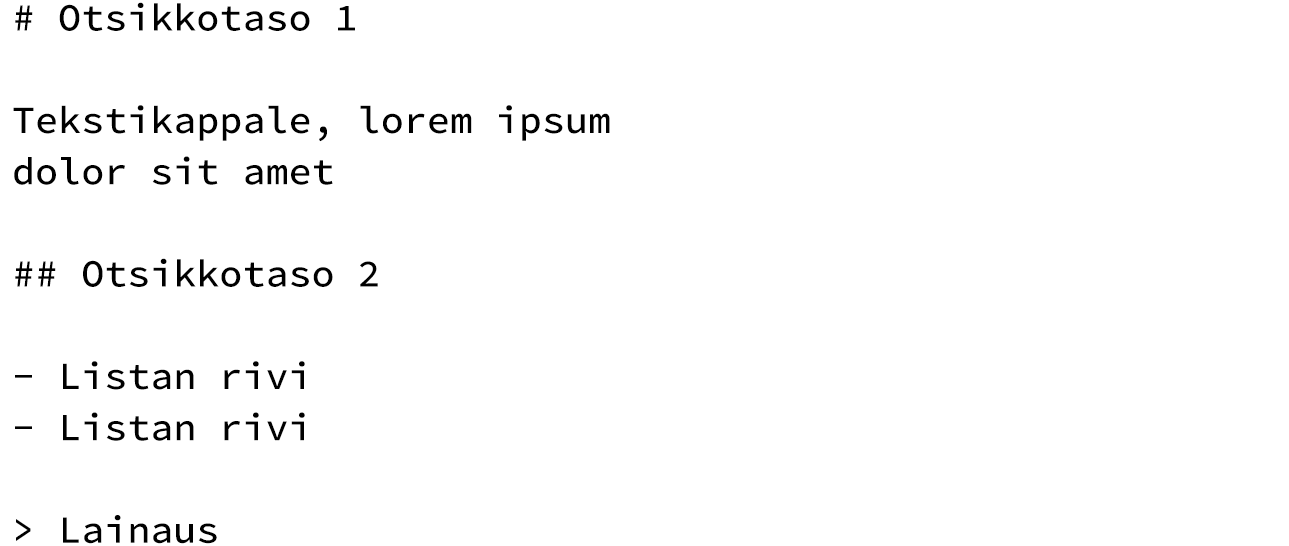
<style>
.page{position:relative;width:1289px;height:546px;background:#ffffff}
.page>*{position:absolute;margin:0}
.t1{font:38.4px/51.2px "SourceCodePro-Medium";color:#000000}
</style>
<div class="page">
<p class="t1" style="left:13px;top:2px;width:597px;height:542px"># Otsikkotaso 1<br><br>Tekstikappale, lorem ipsum<br>dolor sit amet<br><br>## Otsikkotaso 2<br><br>- Listan rivi<br>- Listan rivi<br><br>&gt; Lainaus</p>
</div>
